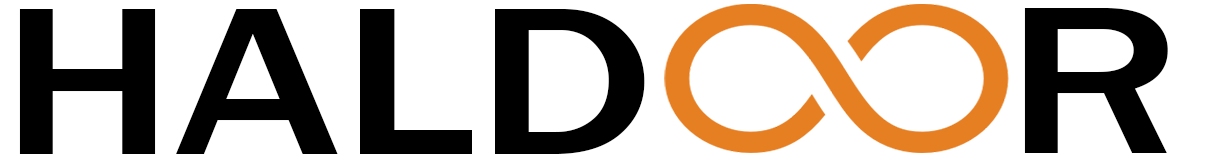
<style>
.page{position:relative;width:1212px;height:163px;background:#ffffff}
.page>*{position:absolute;margin:0}
.t1{font:216.6px "FranklinGothic-Medium";color:#000000;scale:1.26 1}
</style>
<div class="page">
<p class="t1" style="left:19px;top:9px;width:626px;height:145px">HALD</p>
<p class="t1" style="left:1024px;top:8px;width:144px;height:145px">R</p>
</div>
